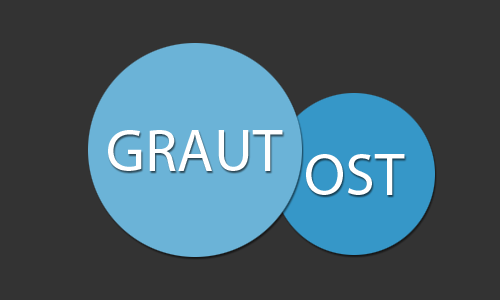
<style>
.page{position:relative;width:500px;height:300px;background:#333333}
.page>*{position:absolute;margin:0}
.t1{font:60px "MyriadPro-Regular";color:#ffffff}
</style>
<div class="page">
<p class="t1" style="left:108px;top:130px;width:175px;height:41px">GRAUT</p>
<p class="t1" style="left:306px;top:154px;width:99px;height:41px">OST</p>
</div>
